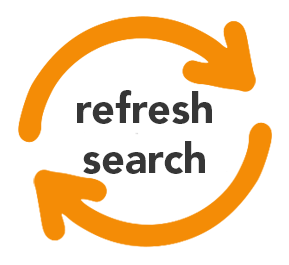
<style>
.page{position:relative;width:289px;height:265px;background:#ffffff}
.page>*{position:absolute;margin:0}
.t1{font:41.7px "AvenirLTStd-Black";color:#363636}
</style>
<div class="page">
<p class="t1" style="left:77px;top:90px;width:135px;height:84px;text-align:center">refresh<br>search</p>
</div>
